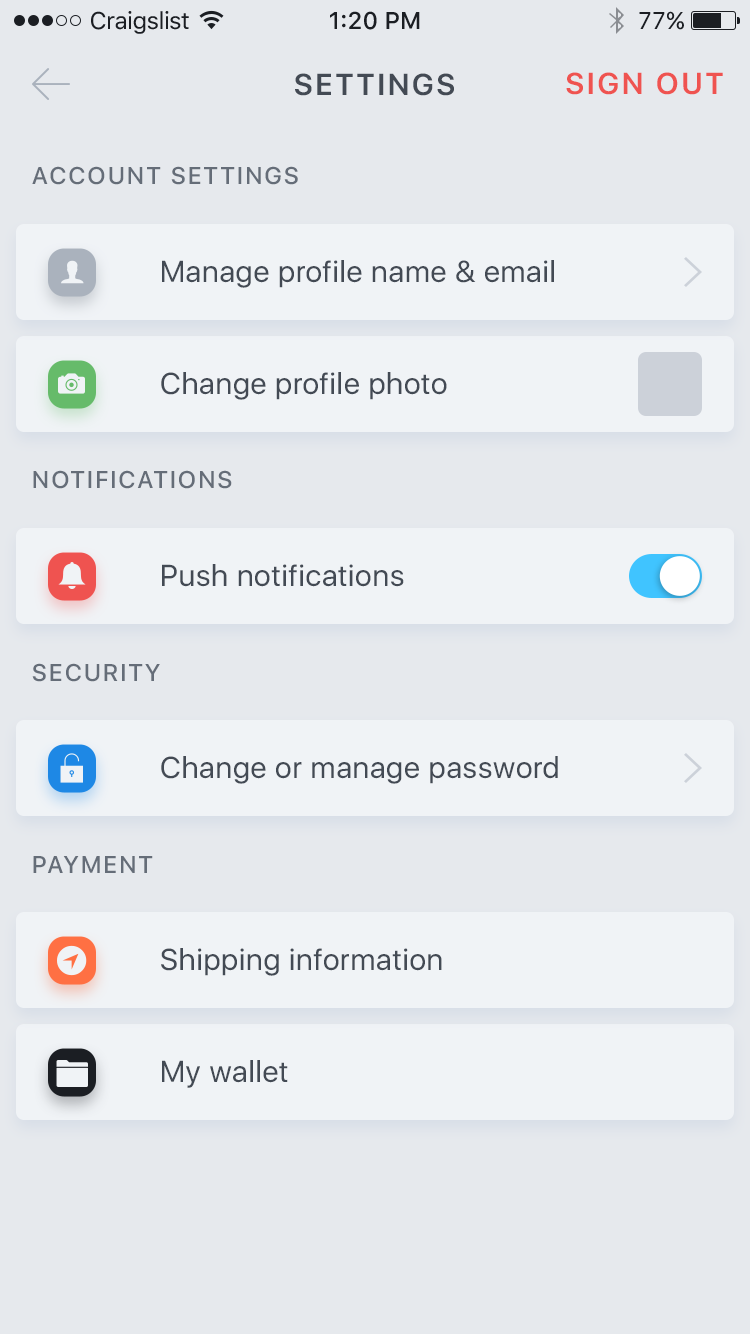
<style>
.page{position:relative;width:750px;height:1334px;background:#e6e9ed}
.page>*{position:absolute;margin:0}
.t1{font:24px "SFUIText-Regular";letter-spacing:-0.025em;color:#1b1e23}
.t2{font:24px "SFUIText-Medium";color:#1b1e23}
.t3{font:24px "SFUIText-Regular";color:#1b1e23}
.t4{font:30px "SFUIDisplay-Semibold";letter-spacing:0.1em;color:#434a54;text-transform:uppercase}
.t5{font:30px "SFUIDisplay-Semibold";letter-spacing:0.1em;color:#ef5350;text-transform:uppercase}
.t6{font:24px "SFUIDisplay-Medium";letter-spacing:0.1em;color:#656d78;text-transform:uppercase}
.t7{font:30px "SFUIDisplay-Regular";letter-spacing:0.025em;color:#434a54}
</style>
<div class="page">
<p class="t1" style="left:91px;top:11px;width:98px;height:23px">Craigslist</p>
<p class="t2" style="left:330px;top:11px;width:90px;height:19px">1:20 PM</p>
<p class="t3" style="left:639px;top:11px;width:45px;height:19px">77%</p>
<p class="t4" style="left:295px;top:73px;width:159px;height:23px">Settings</p>
<p class="t5" style="left:566px;top:72px;width:157px;height:23px">Sign out</p>
<p class="t6" style="left:32px;top:166px;width:266px;height:19px">Account settings</p>
<p class="t7" style="left:162px;top:260px;width:392px;height:28px">Manage profile name &amp; email</p>
<p class="t7" style="left:161px;top:372px;width:286px;height:28px">Change profile photo</p>
<p class="t6" style="left:33px;top:470px;width:199px;height:19px">Notifications</p>
<p class="t7" style="left:162px;top:564px;width:242px;height:23px">Push notifications</p>
<p class="t6" style="left:32px;top:663px;width:128px;height:19px">Security</p>
<p class="t7" style="left:161px;top:756px;width:397px;height:28px">Change or manage password</p>
<p class="t6" style="left:33px;top:856px;width:120px;height:17px">Payment</p>
<p class="t7" style="left:161px;top:948px;width:281px;height:28px">Shipping information</p>
<p class="t7" style="left:162px;top:1060px;width:126px;height:28px">My wallet</p>
</div>
